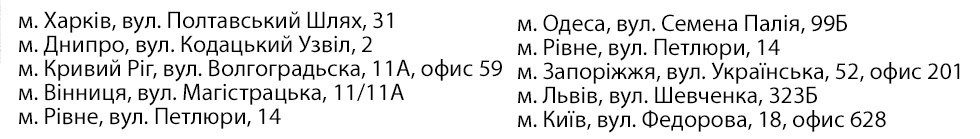
<style>
.page{position:relative;width:980px;height:139px;background:#ffffff}
.page>*{position:absolute;margin:0}
.t1{font:24px/24px "MyriadPro-Regular";color:#000000}
</style>
<div class="page">
<p class="t1" style="left:19px;top:11px;width:483px;height:119px">м. Харків, вул. Полтавський Шлях, 31<br>м. Днипро, вул. Кодацький Узвіл, 2<br>м. Кривий Ріг, вул. Волгоградьска, 11А, офис 59<br>м. Вінниця, вул. Магістрацька, 11/11А<br>м. Рівне, вул. Петлюри, 14</p>
<p class="t1" style="left:518px;top:14px;width:442px;height:119px">м. Одеса, вул. Семена Палія, 99Б<br>м. Рівне, вул. Петлюри, 14<br>м. Запоріжжя, вул. Українська, 52, офис 201<br>м. Львів, вул. Шевченка, 323Б<br>м. Київ, вул. Федорова, 18, офис 628</p>
</div>
